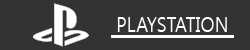
<style>
.page{position:relative;width:250px;height:50px;background:#333333}
.page>*{position:absolute;margin:0}
.t1{font:20.7px "MalgunGothicRegular";color:#ffffff;scale:0.89 1}
</style>
<div class="page">
<p class="t1" style="left:117px;top:17px;width:110px;height:15px">PLAYSTATION</p>
</div>
